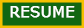
<style>
.page{position:relative;width:84px;height:28px;background:#116712}
.page>*{position:absolute;margin:0}
.t1{font:15px "Verdana";color:#ffffff;font-weight:bold}
</style>
<div class="page">
<p class="t1" style="left:10px;top:6px;width:65px;height:12px">RESUME</p>
</div>
